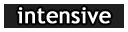
<style>
.page{position:relative;width:128px;height:32px;background:#ffffff}
.page>*{position:absolute;margin:0}
.t1{font:22px "TrebuchetMS";color:#ffffff;font-weight:bold}
</style>
<div class="page">
<p class="t1" style="left:17px;top:7px;width:94px;height:17px">intensive</p>
</div>
